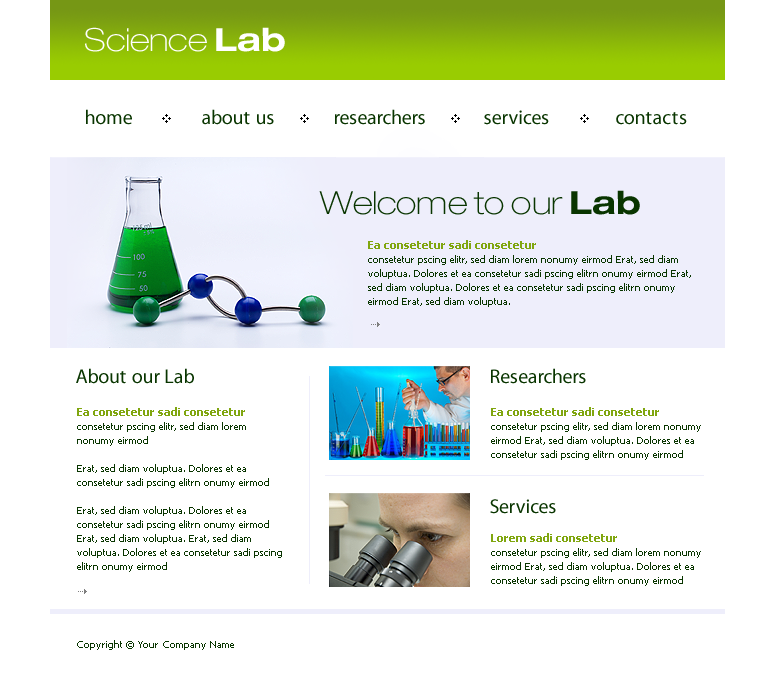
<style>
.page{position:relative;width:775px;height:680px;background:#ffffff}
.page>*{position:absolute;margin:0}
.t1{font:32px "HelveticaNeueLTPro-ThEx";color:#ffffff}
.t2{font:32px "HelveticaNeueLTPro-BdEx";color:#ffffff}
.t3{font:20px "MyriadPro-Regular";color:#093500}
.t4{font:32px "HelveticaNeueLTPro-ThEx";color:#093500}
.t5{font:32px "HelveticaNeueLTPro-BdEx";color:#093500}
.t6{font:10px/14px "Tahoma";color:#093500}
.t7{font:11px/14px "Tahoma-Bold";color:#80a60f}
.t8{font:10px "Tahoma";color:#093500}
</style>
<div class="page">
<p class="t1" style="left:85px;top:27px;width:200px;height:25px">Science <span class="t2">Lab</span></p>
<p class="t3" style="left:86px;top:109px;width:46px;height:16px">home</p>
<p class="t3" style="left:202px;top:109px;width:72px;height:16px">about us</p>
<p class="t3" style="left:335px;top:109px;width:90px;height:16px">researchers</p>
<p class="t3" style="left:484px;top:110px;width:65px;height:15px">services</p>
<p class="t3" style="left:616px;top:112px;width:71px;height:13px">contacts</p>
<p class="t4" style="left:319px;top:190px;width:321px;height:25px">Welcome to our <span class="t5">Lab</span></p>
<p class="t6" style="left:368px;top:240px;width:323px;height:67px"><span class="t7">Ea consetetur sadi consetetur <br></span>consetetur pscing elitr, sed diam lorem nonumy eirmod Erat, sed diam voluptua. Dolores et ea consetetur sadi pscing elitrn onumy eirmod Erat, sed diam voluptua. Dolores et ea consetetur sadi pscing elitrn onumy eirmod Erat, sed diam voluptua.</p>
<p class="t3" style="left:76px;top:368px;width:118px;height:16px">About our Lab</p>
<p class="t3" style="left:491px;top:368px;width:95px;height:16px">Researchers</p>
<p class="t6" style="left:77px;top:407px;width:205px;height:165px"><span class="t7">Ea consetetur sadi consetetur <br></span>consetetur pscing elitr, sed diam lorem nonumy eirmod <br><br>Erat, sed diam voluptua. Dolores et ea consetetur sadi pscing elitrn onumy eirmod <br><br>Erat, sed diam voluptua. Dolores et ea consetetur sadi pscing elitrn onumy eirmod Erat, sed diam voluptua. Erat, sed diam voluptua. Dolores et ea consetetur sadi pscing elitrn onumy eirmod</p>
<p class="t6" style="left:491px;top:407px;width:210px;height:53px"><span class="t7">Ea consetetur sadi consetetur <br></span>consetetur pscing elitr, sed diam lorem nonumy eirmod Erat, sed diam voluptua. Dolores et ea consetetur sadi pscing elitrn onumy eirmod</p>
<p class="t3" style="left:490px;top:499px;width:66px;height:15px">Services</p>
<p class="t6" style="left:491px;top:533px;width:210px;height:53px"><span class="t7">Lorem sadi consetetur <br></span>consetetur pscing elitr, sed diam lorem nonumy eirmod Erat, sed diam voluptua. Dolores et ea consetetur sadi pscing elitrn onumy eirmod</p>
<p class="t8" style="left:77px;top:640px;width:157px;height:10px">Copyright © Your Company Name</p>
</div>
